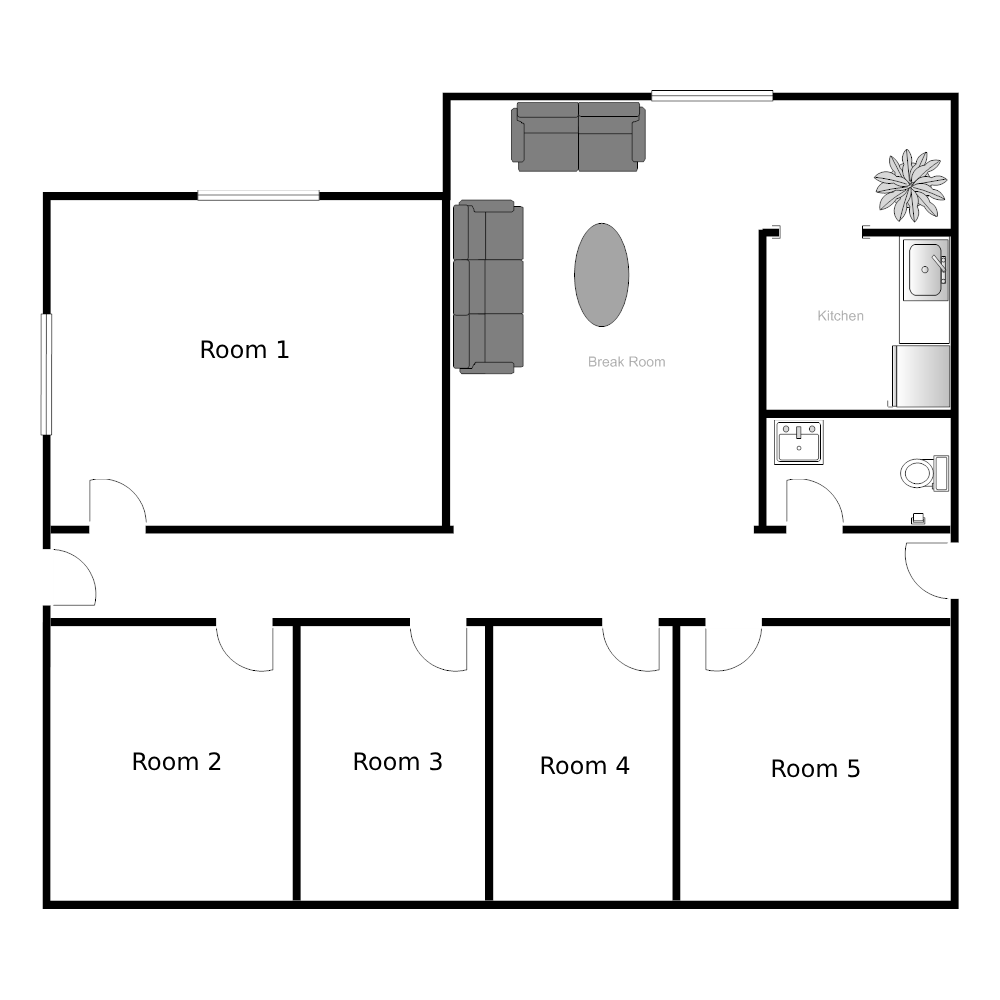
<style>
.page{position:relative;width:1000px;height:1000px;background:#ffffff}
.page>*{position:absolute;margin:0}
.t1{font:24px "DejaVuSans";color:#000000}
</style>
<div class="page">
<p class="t1" style="left:201px;top:340px;width:88px;height:19px">Room 1</p>
<p class="t1" style="left:133px;top:752px;width:88px;height:19px">Room 2</p>
<p class="t1" style="left:354px;top:752px;width:88px;height:19px">Room 3</p>
<p class="t1" style="left:541px;top:756px;width:89px;height:19px">Room 4</p>
<p class="t1" style="left:772px;top:759px;width:88px;height:19px">Room 5</p>
</div>
